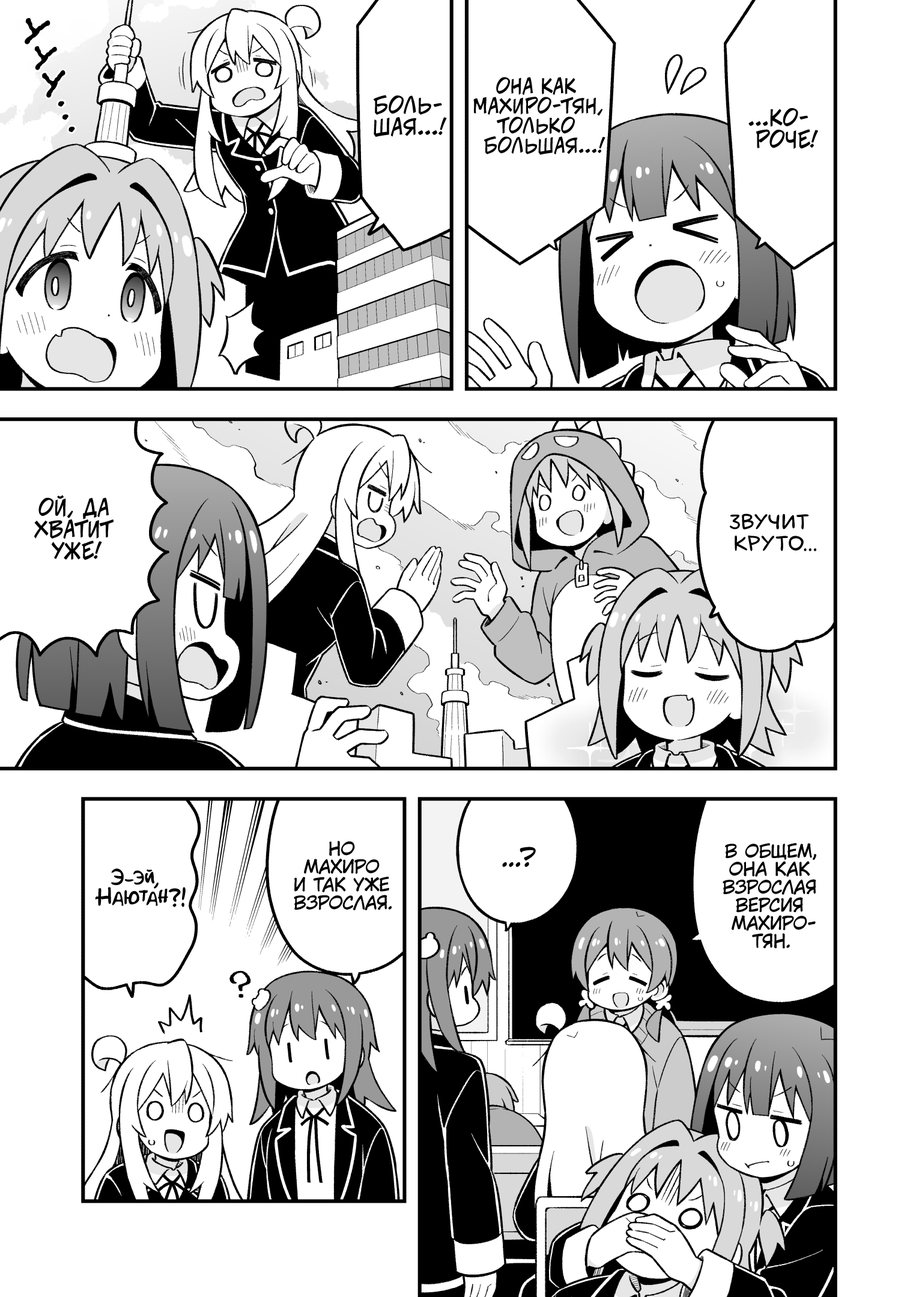
<style>
.page{position:relative;width:919px;height:1297px;background:#ffffff}
.page>*{position:absolute;margin:0}
.t1{font:39.6px "el_CCEvilSchemes";color:#000000;text-transform:uppercase}
.t2{font:36px "el_CCEvilSchemes";color:#000000;text-transform:uppercase}
.t3{font:37.8px "el_CCEvilSchemes";color:#000000;text-transform:uppercase}
.t4{font:19.8px "v_CCJeffCampbell";color:#000000;text-transform:uppercase}
.t5{font:21.6px "v_CCJeffCampbell";color:#000000;text-transform:uppercase}
.t6{font:21.6px "laCartoonerie";color:#000000;text-transform:uppercase}
.t7{font:18px "KuraiVoice2";color:#000000;text-transform:uppercase}
.t8{font:25.2px "KuraiVoice2";color:#000000;text-transform:uppercase}
.t9{font:19.8px "AkbarPlain";color:#000000}
</style>
<div class="page">
<p class="t1" style="left:25px;top:18px;width:25px;height:26px;rotate:16deg">у</p>
<p class="t2" style="left:34px;top:46px;width:23px;height:24px;rotate:12deg">у</p>
<p class="t3" style="left:42px;top:70px;width:23px;height:28px;rotate:1deg">у</p>
<p class="t4" style="left:473px;top:77px;width:132px;height:78px;text-align:center">Она как<br>Махиро-тян,<br>только<br>большая...!</p>
<p class="t2" style="left:58px;top:101px;width:6px;height:6px">.</p>
<p class="t5" style="left:373px;top:95px;width:74px;height:42px;text-align:center">Боль-<br>шая...!</p>
<p class="t5" style="left:748px;top:108px;width:70px;height:41px;text-align:center">...Ко-<br>роче!</p>
<p class="t2" style="left:62px;top:114px;width:6px;height:6px">.</p>
<p class="t2" style="left:68px;top:127px;width:7px;height:5px">.</p>
<p class="t5" style="left:34px;top:495px;width:80px;height:65px;text-align:center">Ой, да<br>хватит<br>уже!</p>
<p class="t6" style="left:730px;top:514px;width:86px;height:37px;text-align:center">Звучит<br>круто...</p>
<p class="t7" style="left:294px;top:841px;width:98px;height:70px;text-align:center">Но<br>Махиро<br>и так уже<br>взрослая.</p>
<p class="t7" style="left:723px;top:843px;width:93px;height:106px;text-align:center">В общем,<br>она как<br>взрослая<br>версия<br>Махиро-<br>тян.</p>
<p class="t8" style="left:502px;top:847px;width:34px;height:20px">...?</p>
<p class="t9" style="left:95px;top:869px;width:91px;height:39px;text-align:center">Э-эй,<br>Наютан?!</p>
</div>
